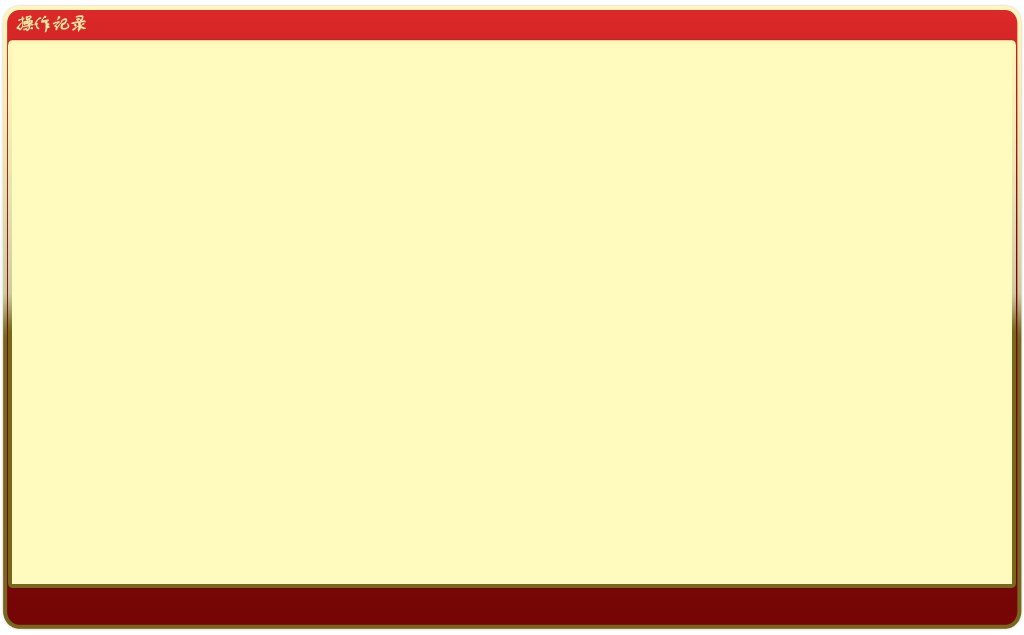
<style>
.page{position:relative;width:1024px;height:635px;background:#fffbbf}
.page>*{position:absolute;margin:0}
.t1{font:20px "FZSTK--GBK1-0";letter-spacing:-0.14em;color:#f1e8a5;font-weight:bold}
</style>
<div class="page">
<p class="t1" style="left:16px;top:15px;width:70px;height:18px">操作记录</p>
</div>
